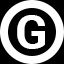
<style>
.page{position:relative;width:64px;height:64px;background:#000000}
.page>*{position:absolute;margin:0}
.t1{font:48px "Roboto-Bold";color:#ffffff}
</style>
<div class="page">
<p class="t1" style="left:17px;top:15px;width:28px;height:34px">G</p>
</div>
